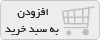
<style>
.page{position:relative;width:100px;height:40px;background:#ededee}
.page>*{position:absolute;margin:0}
.t1{font:11.4px "BYekan";color:#231f20}
</style>
<div class="page">
<p class="t1" style="left:5px;top:8px;width:54px;height:27px;text-align:center">افزودن <br>به سبد خرید</p>
</div>
